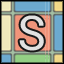
<style>
.page{position:relative;width:64px;height:64px}
.page>*{position:absolute;margin:0}
.t1{font:48px "Roboto-Regular";color:#e1e1e1}
</style>
<div class="page">
<p class="t1" style="left:19px;top:15px;width:25px;height:36px">S</p>
</div>
